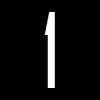
<style>
.page{position:relative;width:100px;height:100px;background:#000000}
.page>*{position:absolute;margin:0}
.t1{font:100px "AgencyFB-Reg";color:#ffffff}
</style>
<div class="page">
<p class="t1" style="left:44px;top:12px;width:11px;height:76px">1</p>
</div>
